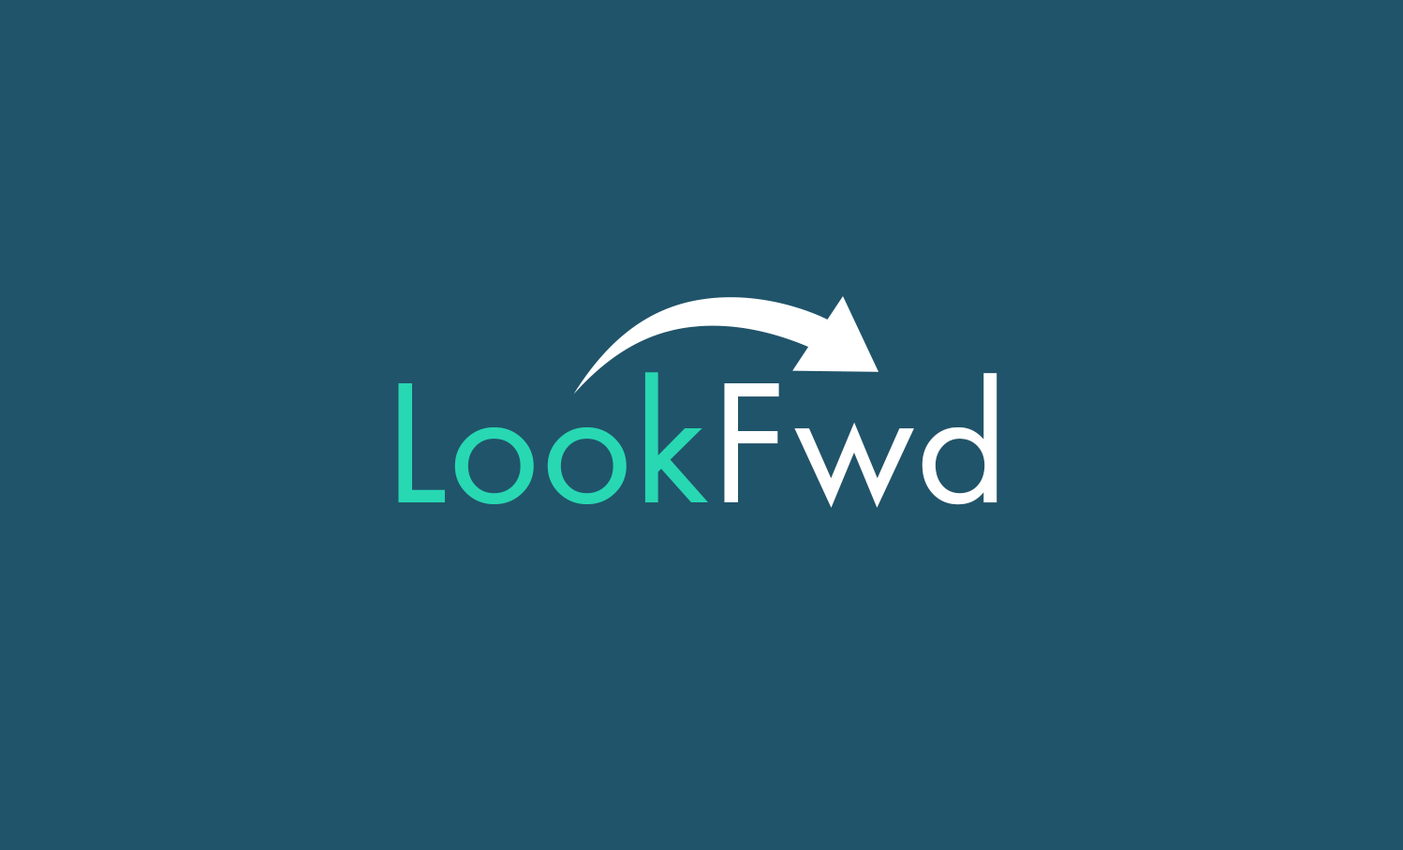
<style>
.page{position:relative;width:1403px;height:850px;background:#20546a}
.page>*{position:absolute;margin:0}
.t1{font:177.9px "Futura-Normal";color:#28d8b3}
.t2{font:177.9px "Futura-Normal";letter-spacing:0.04em;color:#ffffff}
.t3{font:177.9px "Futura-Normal";color:#ffffff}
</style>
<div class="page">
<p class="t1" style="left:398px;top:372px;width:600px;height:136px">Look<span class="t2">F</span><span class="t3">wd</span></p>
</div>
